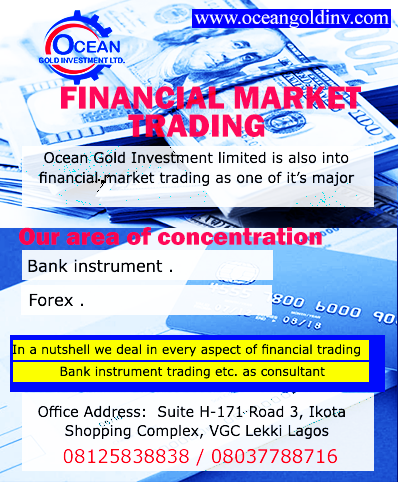
<style>
.page{position:relative;width:398px;height:482px}
.page>*{position:absolute;margin:0}
.t1{font:20.3px "TimesNewRomanPSMT";color:#ffffff}
.t2{font:33.3px "FranklinGothic-Heavy";color:#fe075a}
.t3{font:33.3px "FranklinGothic-Heavy";color:#fe085a}
.t4{font:14.7px "Verdana";color:#151515}
.t5{font:25.3px "FranklinGothic-Heavy";color:#fd065a}
.t6{font:16.7px "Verdana";color:#151515}
.t7{font:12.7px "Verdana";color:#000000}
.t8{font:18.7px "Verdana";color:#fe010e}
</style>
<div class="page">
<p class="t1" style="left:194px;top:9px;width:195px;height:19px">www.oceangoldinv.com</p>
<p class="t2" style="left:61px;top:86px;width:300px;height:23px">FINANCIAL MARKET</p>
<p class="t3" style="left:128px;top:114px;width:137px;height:23px">TRADING</p>
<p class="t4" style="left:44px;top:151px;width:305px;height:13px">Ocean Gold Investment limited is also into</p>
<p class="t4" style="left:39px;top:171px;width:316px;height:15px">financial market trading as one of it’s major</p>
<p class="t5" style="left:19px;top:227px;width:303px;height:18px">Our area of concentration</p>
<p class="t6" style="left:28px;top:259px;width:144px;height:14px">. Bank instrument</p>
<p class="t6" style="left:29px;top:293px;width:54px;height:14px">. Forex</p>
<p class="t7" style="left:12px;top:344px;width:348px;height:13px">In a nutshell we deal in every aspect of financial trading</p>
<p class="t7" style="left:60px;top:366px;width:265px;height:13px">Bank instrument trading etc. as consultant</p>
<p class="t4" style="left:38px;top:405px;width:307px;height:15px">Office Address:  Suite H-171 Road 3, Ikota</p>
<p class="t4" style="left:65px;top:424px;width:264px;height:15px">Shopping Complex, VGC Lekki Lagos</p>
<p class="t8" style="left:63px;top:448px;width:274px;height:18px">08037788716 / 08125838838</p>
</div>
